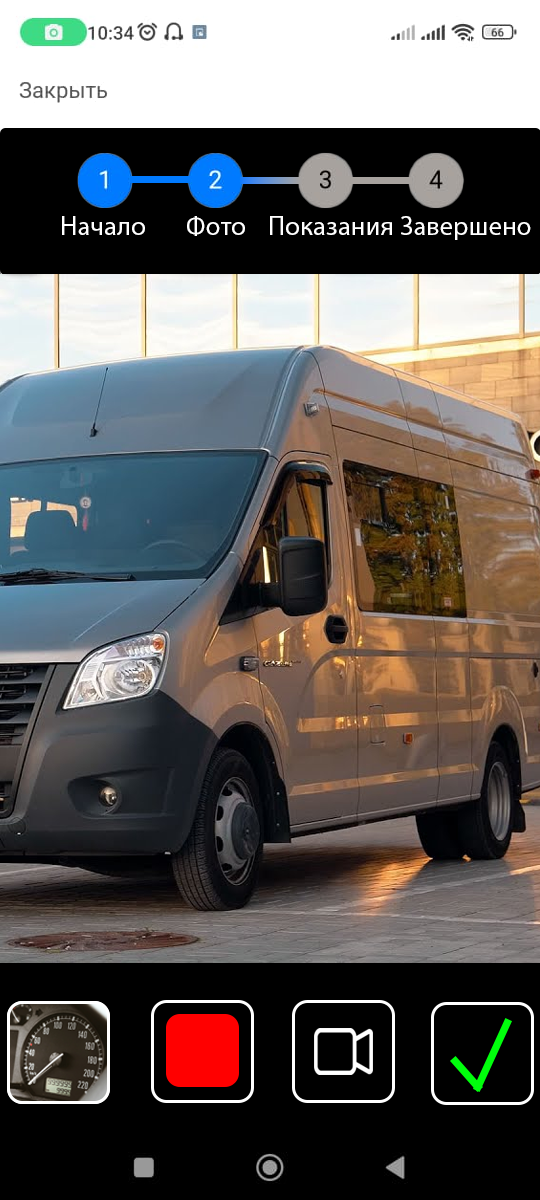
<style>
.page{position:relative;width:540px;height:1200px;background:#000000}
.page>*{position:absolute;margin:0}
.t1{font:26.9px "MyriadPro-Regular";color:#ffffff}
</style>
<div class="page">
<p class="t1" style="left:62px;top:216px;width:83px;height:19px">Начало</p>
<p class="t1" style="left:187px;top:216px;width:58px;height:20px">Фото</p>
<p class="t1" style="left:270px;top:216px;width:122px;height:19px">Показания</p>
<p class="t1" style="left:401px;top:216px;width:130px;height:24px">Завершено</p>
</div>
